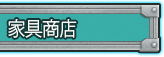
<style>
.page{position:relative;width:164px;height:57px}
.page>*{position:absolute;margin:0}
.t1{font:20px "GothicMB101Pr6N-Light";letter-spacing:-0.02em;color:#fbfbf9;scale:0.9 1}
</style>
<div class="page">
<p class="t1" style="left:8px;top:19px;width:69px;height:19px">家具商店</p>
</div>
